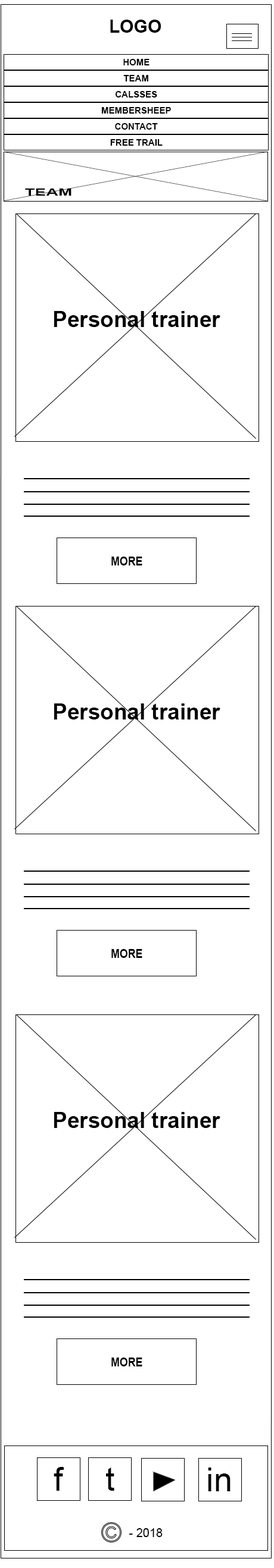
<style>
.page{position:relative;width:274px;height:1568px;background:#ffffff}
.page>*{position:absolute;margin:0}
.t1{font:17.8px "Arial-BoldMT";color:#000000}
.t2{font:8.9px "Arial-BoldMT";color:#000000}
.t3{font:9.3px "Arial-BoldMT";color:#000000;scale:1.82 1}
.t4{font:22.1px "Arial-BoldMT";color:#000000}
.t5{font:12.2px "Arial-BoldMT";color:#000000;scale:0.87 1}
.t6{font:33.1px "ArialMT";color:#000000}
.t7{font:11.9px "ArialMT";color:#000000}
</style>
<div class="page">
<p class="t1" style="left:110px;top:20px;width:51px;height:13px">LOGO</p>
<p class="t2" style="left:123px;top:59px;width:26px;height:6px">HOME</p>
<p class="t2" style="left:123px;top:75px;width:25px;height:6px">TEAM</p>
<p class="t2" style="left:115px;top:91px;width:42px;height:7px">CALSSES</p>
<p class="t2" style="left:101px;top:107px;width:70px;height:7px">MEMBERSHEEP</p>
<p class="t2" style="left:115px;top:123px;width:43px;height:7px">CONTACT</p>
<p class="t2" style="left:110px;top:139px;width:52px;height:7px">FREE TRAIL</p>
<p class="t3" style="left:25px;top:188px;width:46px;height:8px">TEAM</p>
<p class="t4" style="left:54px;top:311px;width:166px;height:16px">Personal trainer</p>
<p class="t5" style="left:111px;top:557px;width:31px;height:8px">MORE</p>
<p class="t4" style="left:54px;top:703px;width:166px;height:16px">Personal trainer</p>
<p class="t5" style="left:111px;top:949px;width:31px;height:9px">MORE</p>
<p class="t4" style="left:54px;top:1112px;width:166px;height:16px">Personal trainer</p>
<p class="t5" style="left:111px;top:1358px;width:31px;height:8px">MORE</p>
<p class="t6" style="left:54px;top:1467px;width:10px;height:24px">f</p>
<p class="t6" style="left:106px;top:1468px;width:8px;height:23px">t</p>
<p class="t6" style="left:208px;top:1468px;width:22px;height:23px">in</p>
<p class="t7" style="left:129px;top:1528px;width:33px;height:9px">- 2018</p>
</div>
